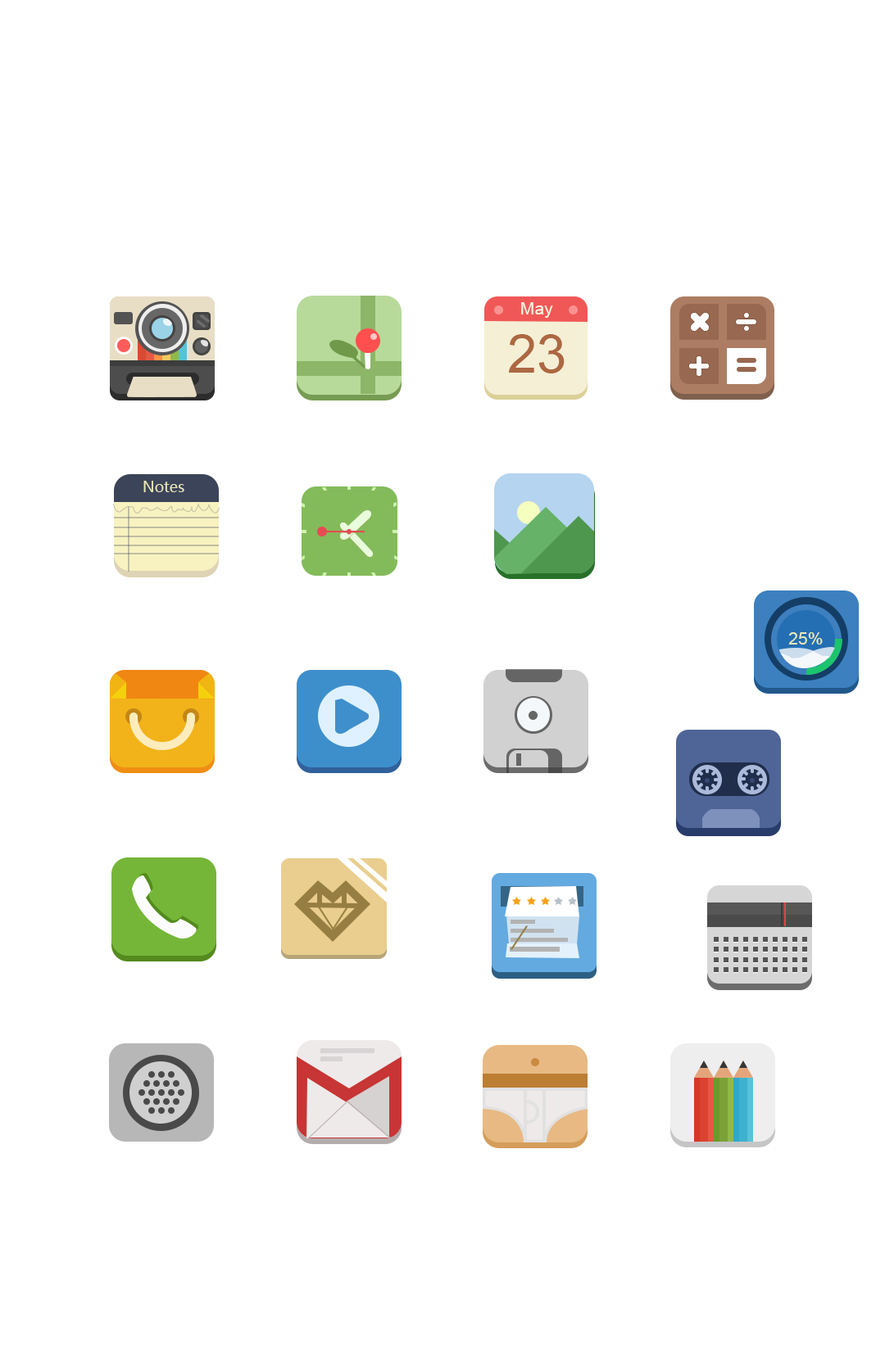
<style>
.page{position:relative;width:885px;height:1348px;background:#ffffff}
.page>*{position:absolute;margin:0}
.t1{font:17.5px "ArialMT";color:#f7f5de}
.t2{font:53.6px "ArialMT";color:#ac6841}
.t3{font:14.7px "MicrosoftYaHei";color:#eae6b9}
.t4{font:17.3px "ArialMT";color:#e9eab9}
</style>
<div class="page">
<p class="t1" style="left:521px;top:302px;width:32px;height:16px">May</p>
<p class="t2" style="left:509px;top:334px;width:55px;height:39px">23</p>
<p class="t3" style="left:143px;top:481px;width:41px;height:11px">Notes</p>
<p class="t4" style="left:788px;top:632px;width:34px;height:13px">25%</p>
</div>
